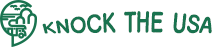
<style>
.page{position:relative;width:217px;height:47px;background:#ffffff}
.page>*{position:absolute;margin:0}
.t1{font:15px "HaanBaekjeB";color:#19734f;scale:1.4 1}
.t2{font:13.5px "HaanBaekjeB";color:#19734f;scale:1.4 1}
</style>
<div class="page">
<p class="t1" style="left:42px;top:11px;width:170px;height:23px">KNOCK THE USA<br> <span class="t2">TOUR</span></p>
</div>
